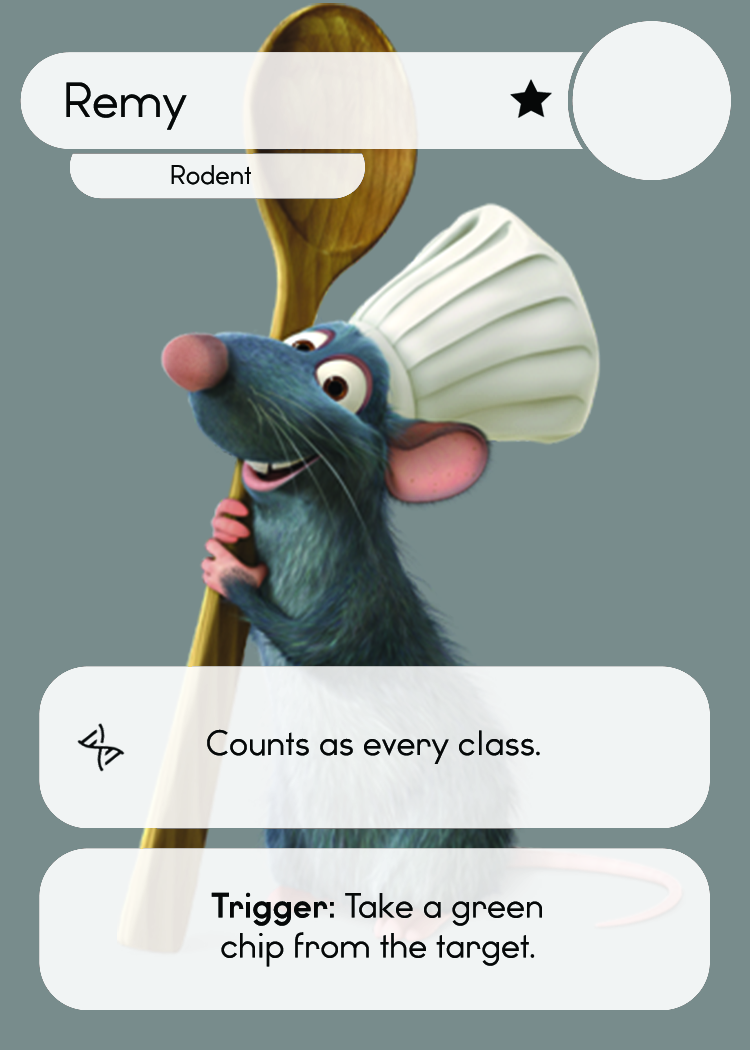
<style>
.page{position:relative;width:750px;height:1050px;background:#788c8c}
.page>*{position:absolute;margin:0}
.t1{font:46.7px "WatchwordRegularDemo";color:#060808}
.t2{font:25.5px "WatchwordRegularDemo";color:#060808}
.t3{font:33.3px "WatchwordRegularDemo";color:#060808}
.t4{font:33.3px "Dosis-Medium";color:#060808}
.t5{font:33.3px "WatchwordBoldDemo";color:#060808}
</style>
<div class="page">
<p class="t1" style="left:66px;top:82px;width:121px;height:48px">Remy</p>
<p class="t2" style="left:171px;top:165px;width:80px;height:20px">Rodent</p>
<p class="t3" style="left:207px;top:729px;width:333px;height:35px">Counts as every class<span class="t4">.</span></p>
<p class="t3" style="left:211px;top:892px;width:331px;height:75px;text-align:center"><span class="t5">Trigger: </span>Take a green<br>chip from the target<span class="t4">.</span></p>
</div>
